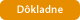
<style>
.page{position:relative;width:80px;height:20px;background:#e68d00}
.page>*{position:absolute;margin:0}
.t1{font:11px "MyriadPro-Semibold";color:#ffffff}
</style>
<div class="page">
<p class="t1" style="left:17px;top:5px;width:46px;height:8px">Dôkladne</p>
</div>
